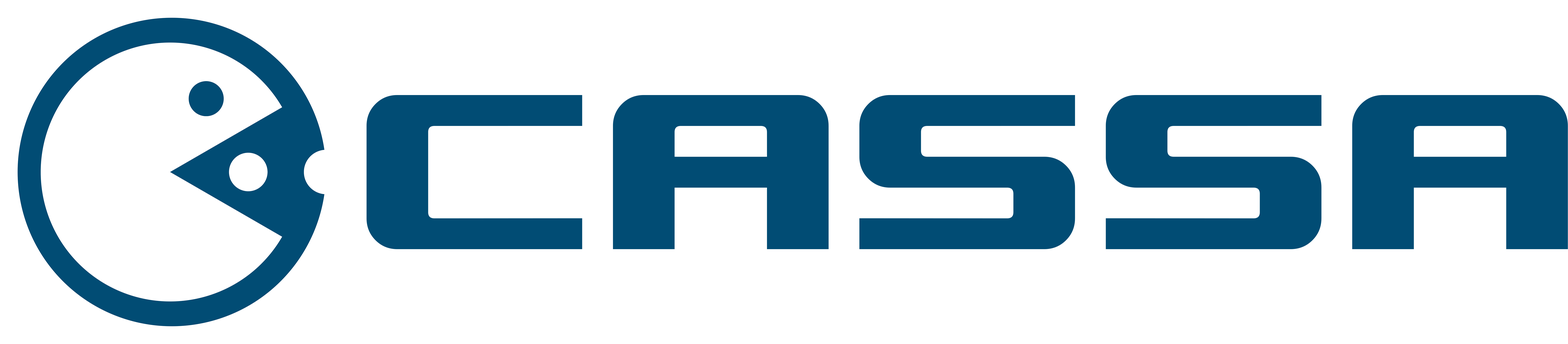
<style>
.page{position:relative;width:1568px;height:344px;background:#ffffff}
.page>*{position:absolute;margin:0}
.t1{font:246.4px "SpaceMarine-Nominal";color:#014c74}
</style>
<div class="page">
<p class="t1" style="left:366px;top:95px;width:1202px;height:154px">CASSA</p>
</div>
